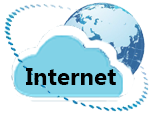
<style>
.page{position:relative;width:153px;height:115px;background:#ffffff}
.page>*{position:absolute;margin:0}
.t1{font:24px "MicrosoftTaiLe-Bold";color:#000000}
</style>
<div class="page">
<p class="t1" style="left:26px;top:68px;width:90px;height:17px">Internet</p>
</div>
